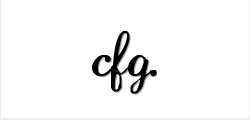
<style>
.page{position:relative;width:250px;height:120px;background:#ffffff}
.page>*{position:absolute;margin:0}
.t1{font:45px "LaurenScript";letter-spacing:-0.025em;color:#000000}
.t2{font:45px "LaurenScript";letter-spacing:-0.025em}
</style>
<div class="page">
<p class="t1" style="left:92px;top:31px;width:65px;height:63px">cfg.</p>
<p class="t2" style="left:93px;top:32px;width:64px;height:63px">cfg.</p>
</div>
